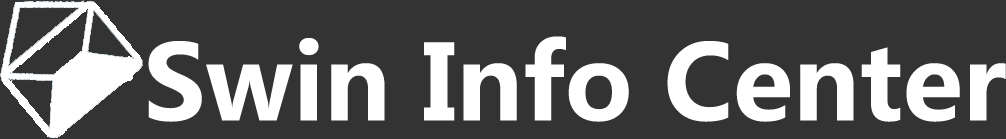
<style>
.page{position:relative;width:1006px;height:139px;background:#333333}
.page>*{position:absolute;margin:0}
.t1{font:103.2px "MicrosoftYaHei-Bold";color:#ffffff}
</style>
<div class="page">
<p class="t1" style="left:148px;top:36px;width:858px;height:86px">Swin Info Center</p>
</div>
